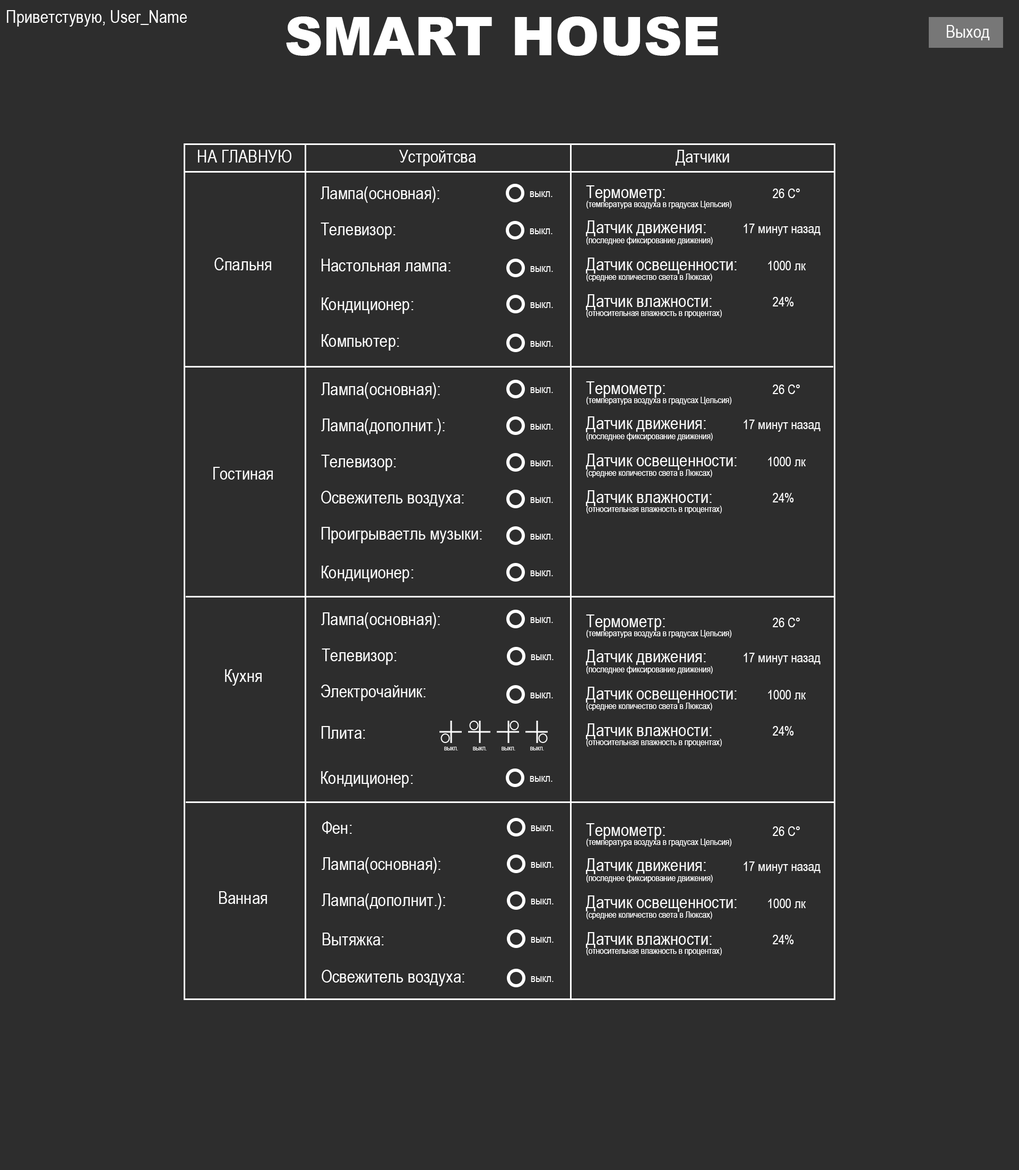
<style>
.page{position:relative;width:1019px;height:1170px;background:#2d2d2d}
.page>*{position:absolute;margin:0}
.t1{font:17.7px "ArialNarrow";color:#ffffff}
.t2{font:53.1px "Arial-Black";color:#ffffff}
.t3{font:17.7px "ArialNarrow";color:#fefefe}
.t4{font:13.3px "ArialNarrow";color:#ffffff}
.t5{font:8.8px "ArialNarrow";color:#ffffff}
</style>
<div class="page">
<p class="t1" style="left:7px;top:10px;width:180px;height:17px">Приветстувую, User_Name</p>
<p class="t2" style="left:286px;top:16px;width:432px;height:40px">SMART HOUSE</p>
<p class="t1" style="left:947px;top:25px;width:43px;height:15px">Выход</p>
<p class="t3" style="left:198px;top:150px;width:93px;height:12px">НА ГЛАВНУЮ</p>
<p class="t3" style="left:399px;top:150px;width:77px;height:16px">Устройтсва</p>
<p class="t3" style="left:676px;top:150px;width:54px;height:16px">Датчики</p>
<p class="t1" style="left:586px;top:185px;width:79px;height:17px">Термометр:</p>
<p class="t1" style="left:321px;top:186px;width:119px;height:17px">Лампа(основная):</p>
<p class="t4" style="left:773px;top:188px;width:27px;height:10px">26 С°</p>
<p class="t5" style="left:587px;top:201px;width:145px;height:8px">(температура воздуха в градусах Цельсия)</p>
<p class="t1" style="left:586px;top:220px;width:120px;height:16px">Датчик движения:</p>
<p class="t1" style="left:321px;top:222px;width:75px;height:17px">Телевизор:</p>
<p class="t4" style="left:744px;top:224px;width:77px;height:12px">17 минут назад</p>
<p class="t5" style="left:587px;top:237px;width:126px;height:8px">(последнее фиксирование движения)</p>
<p class="t3" style="left:215px;top:258px;width:56px;height:12px">Спальня</p>
<p class="t1" style="left:586px;top:258px;width:151px;height:16px">Датчик освещенности:</p>
<p class="t1" style="left:322px;top:259px;width:129px;height:12px">Настольная лампа:</p>
<p class="t4" style="left:768px;top:261px;width:38px;height:9px">1000 лк</p>
<p class="t5" style="left:587px;top:273px;width:126px;height:8px">(среднее количество света в Люксах)</p>
<p class="t1" style="left:322px;top:297px;width:92px;height:17px">Кондиционер:</p>
<p class="t1" style="left:586px;top:294px;width:126px;height:16px">Датчик влажности:</p>
<p class="t4" style="left:773px;top:297px;width:21px;height:9px">24%</p>
<p class="t5" style="left:587px;top:310px;width:135px;height:8px">(относительная влажность в процентах)</p>
<p class="t1" style="left:322px;top:334px;width:77px;height:16px">Компьютер:</p>
<p class="t1" style="left:321px;top:382px;width:119px;height:17px">Лампа(основная):</p>
<p class="t1" style="left:586px;top:381px;width:79px;height:17px">Термометр:</p>
<p class="t4" style="left:773px;top:384px;width:27px;height:10px">26 С°</p>
<p class="t5" style="left:587px;top:397px;width:145px;height:8px">(температура воздуха в градусах Цельсия)</p>
<p class="t1" style="left:321px;top:418px;width:124px;height:17px">Лампа(дополнит.):</p>
<p class="t1" style="left:586px;top:416px;width:120px;height:16px">Датчик движения:</p>
<p class="t4" style="left:744px;top:419px;width:77px;height:13px">17 минут назад</p>
<p class="t5" style="left:587px;top:433px;width:126px;height:8px">(последнее фиксирование движения)</p>
<p class="t1" style="left:321px;top:454px;width:75px;height:17px">Телевизор:</p>
<p class="t1" style="left:586px;top:453px;width:151px;height:17px">Датчик освещенности:</p>
<p class="t4" style="left:768px;top:457px;width:38px;height:9px">1000 лк</p>
<p class="t3" style="left:213px;top:467px;width:60px;height:12px">Гостиная</p>
<p class="t5" style="left:587px;top:469px;width:126px;height:8px">(среднее количество света в Люксах)</p>
<p class="t1" style="left:321px;top:491px;width:143px;height:16px">Освежитель воздуха:</p>
<p class="t1" style="left:586px;top:490px;width:126px;height:16px">Датчик влажности:</p>
<p class="t4" style="left:773px;top:493px;width:21px;height:9px">24%</p>
<p class="t5" style="left:587px;top:505px;width:135px;height:8px">(относительная влажность в процентах)</p>
<p class="t1" style="left:322px;top:527px;width:160px;height:16px">Проигрываетль музыки:</p>
<p class="t1" style="left:322px;top:565px;width:92px;height:17px">Кондиционер:</p>
<p class="t1" style="left:321px;top:612px;width:119px;height:17px">Лампа(основная):</p>
<p class="t1" style="left:586px;top:614px;width:79px;height:17px">Термометр:</p>
<p class="t4" style="left:773px;top:618px;width:27px;height:9px">26 С°</p>
<p class="t5" style="left:587px;top:630px;width:145px;height:8px">(температура воздуха в градусах Цельсия)</p>
<p class="t1" style="left:322px;top:648px;width:75px;height:17px">Телевизор:</p>
<p class="t1" style="left:586px;top:649px;width:120px;height:16px">Датчик движения:</p>
<p class="t4" style="left:744px;top:653px;width:77px;height:12px">17 минут назад</p>
<p class="t5" style="left:587px;top:666px;width:126px;height:8px">(последнее фиксирование движения)</p>
<p class="t1" style="left:225px;top:669px;width:37px;height:16px">Кухня</p>
<p class="t1" style="left:321px;top:684px;width:105px;height:17px">Электрочайник:</p>
<p class="t1" style="left:586px;top:687px;width:151px;height:16px">Датчик освещенности:</p>
<p class="t4" style="left:768px;top:690px;width:38px;height:9px">1000 лк</p>
<p class="t5" style="left:587px;top:702px;width:126px;height:8px">(среднее количество света в Люксах)</p>
<p class="t1" style="left:322px;top:726px;width:43px;height:13px">Плита:</p>
<p class="t1" style="left:586px;top:723px;width:126px;height:16px">Датчик влажности:</p>
<p class="t4" style="left:773px;top:726px;width:21px;height:9px">24%</p>
<p class="t5" style="left:587px;top:739px;width:135px;height:8px">(относительная влажность в процентах)</p>
<p class="t1" style="left:321px;top:771px;width:92px;height:16px">Кондиционер:</p>
<p class="t1" style="left:322px;top:821px;width:30px;height:13px">Фен:</p>
<p class="t1" style="left:586px;top:823px;width:79px;height:16px">Термометр:</p>
<p class="t4" style="left:773px;top:826px;width:27px;height:10px">26 С°</p>
<p class="t5" style="left:587px;top:838px;width:145px;height:8px">(температура воздуха в градусах Цельсия)</p>
<p class="t1" style="left:322px;top:857px;width:119px;height:16px">Лампа(основная):</p>
<p class="t1" style="left:586px;top:858px;width:120px;height:16px">Датчик движения:</p>
<p class="t4" style="left:744px;top:861px;width:77px;height:12px">17 минут назад</p>
<p class="t5" style="left:587px;top:874px;width:126px;height:8px">(последнее фиксирование движения)</p>
<p class="t1" style="left:219px;top:891px;width:48px;height:13px">Ванная</p>
<p class="t1" style="left:322px;top:893px;width:123px;height:17px">Лампа(дополнит.):</p>
<p class="t1" style="left:586px;top:895px;width:151px;height:17px">Датчик освещенности:</p>
<p class="t4" style="left:768px;top:898px;width:38px;height:10px">1000 лк</p>
<p class="t5" style="left:587px;top:911px;width:126px;height:8px">(среднее количество света в Люксах)</p>
<p class="t1" style="left:323px;top:932px;width:61px;height:13px">Вытяжка:</p>
<p class="t1" style="left:586px;top:932px;width:126px;height:16px">Датчик влажности:</p>
<p class="t4" style="left:773px;top:934px;width:21px;height:10px">24%</p>
<p class="t5" style="left:587px;top:947px;width:135px;height:8px">(относительная влажность в процентах)</p>
<p class="t1" style="left:322px;top:970px;width:143px;height:16px">Освежитель воздуха:</p>
</div>
